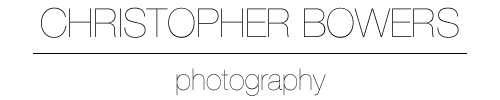
<style>
.page{position:relative;width:500px;height:100px;background:#ffffff}
.page>*{position:absolute;margin:0}
.t1{font:40px "HelveticaNeue-UltraLight";color:#000000;text-transform:uppercase}
.t2{font:30px "HelveticaNeue-UltraLight"}
</style>
<div class="page">
<p class="t1" style="left:41px;top:7px;width:418px;height:31px">Christopher Bowers</p>
<p class="t2" style="left:176px;top:68px;width:150px;height:28px">photography</p>
</div>
